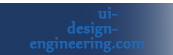
<style>
.page{position:relative;width:173px;height:55px}
.page>*{position:absolute;margin:0}
.t1{font:18px/15px "Nyala-Regular";color:#1d6dc1;font-weight:bold}
.t2{font:16px/15px "Candara";color:#1d6dc1;font-weight:bold}
</style>
<div class="page">
<p class="t1" style="left:29px;top:7px;width:115px;height:46px;opacity:0.85"><span class="t2">                    </span>ui-<br>          design-<br>  engineering.com</p>
</div>
